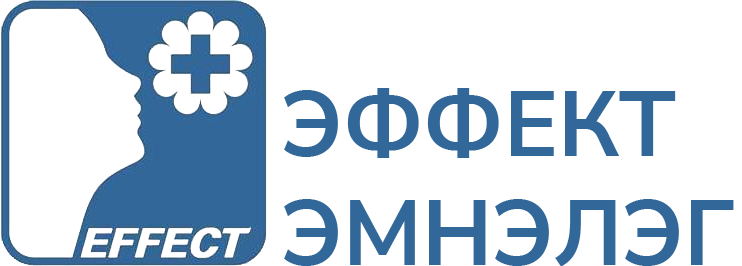
<style>
.page{position:relative;width:742px;height:266px;background:#ffffff}
.page>*{position:absolute;margin:0}
.t1{font:90.9px "NunitoSans-Bold";color:#326799}
</style>
<div class="page">
<p class="t1" style="left:284px;top:88px;width:450px;height:179px">ЭФФЕКТ<br>ЭМНЭЛЭГ</p>
</div>
